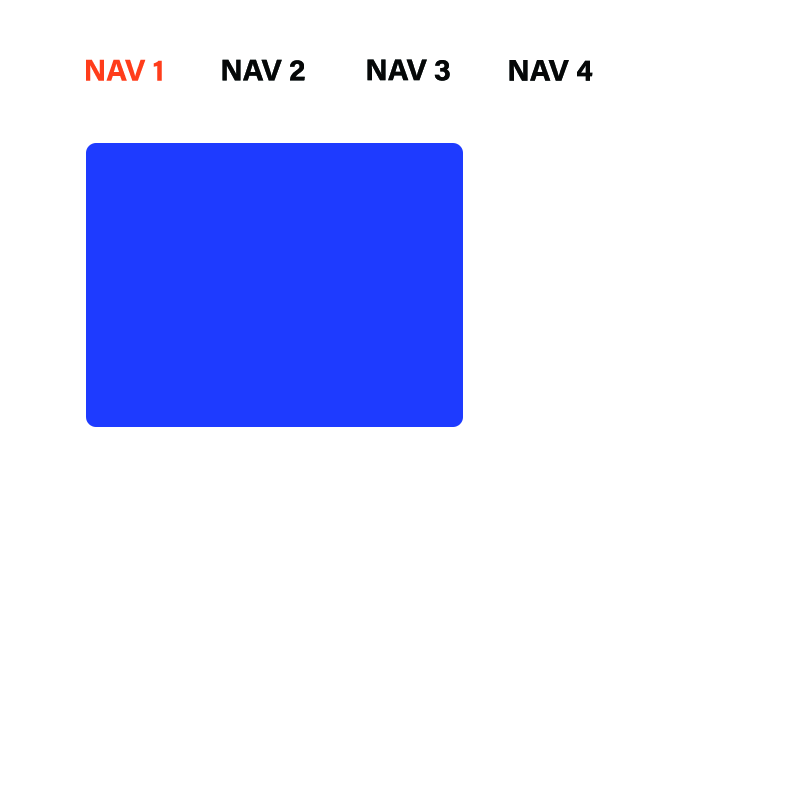
<style>
.page{position:relative;width:800px;height:800px;background:#ffffff}
.page>*{position:absolute;margin:0}
.t1{font:30px "AcuminPro-Bold";color:#ff3d1b}
.t2{font:30px "AcuminPro-Bold";color:#060808}
</style>
<div class="page">
<p class="t1" style="left:86px;top:59px;width:76px;height:22px">NAV 1</p>
<p class="t2" style="left:222px;top:59px;width:83px;height:22px">NAV 2</p>
<p class="t2" style="left:367px;top:59px;width:83px;height:22px">NAV 3</p>
<p class="t2" style="left:509px;top:60px;width:84px;height:21px">NAV 4</p>
</div>
